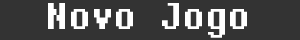
<style>
.page{position:relative;width:300px;height:40px;background:#333333}
.page>*{position:absolute;margin:0}
.t1{font:38px "DeterminationMono";color:#ffffff}
</style>
<div class="page">
<p class="t1" style="left:48px;top:3px;width:199px;height:35px">Novo Jogo</p>
</div>
